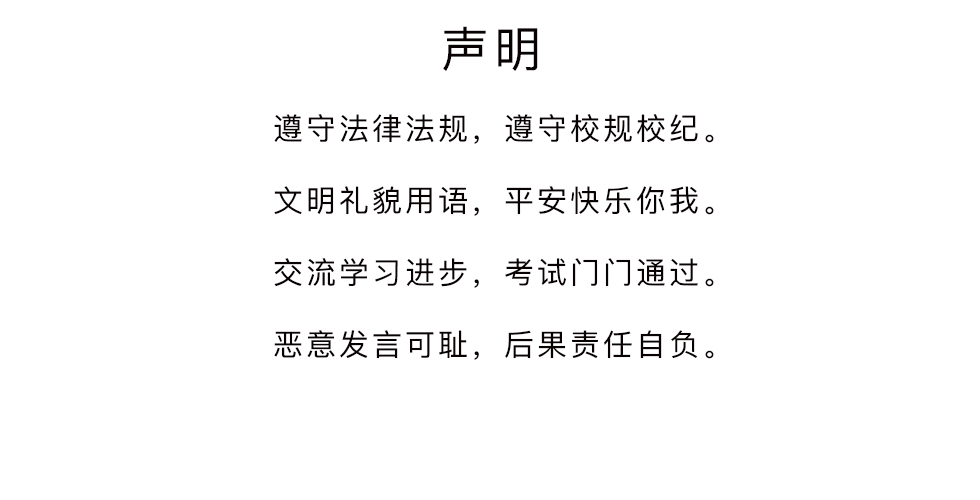
<style>
.page{position:relative;width:980px;height:500px;background:#ffffff}
.page>*{position:absolute;margin:0}
.t1{font:48px "PingFangSC-Regular";letter-spacing:0.1em;color:#080202}
.t2{font:30px "PingFangSC-Regular";letter-spacing:0.1em;color:#080202}
</style>
<div class="page">
<p class="t1" style="left:443px;top:26px;width:95px;height:45px">声明</p>
<p class="t2" style="left:274px;top:114px;width:440px;height:246px;text-align:center">遵守法律法规，遵守校规校纪。<br><br>文明礼貌用语，平安快乐你我。<br><br>交流学习进步，考试门门通过。<br><br>恶意发言可耻，后果责任自负。</p>
</div>
